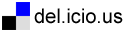
<style>
.page{position:relative;width:140px;height:32px;background:#ffffff}
.page>*{position:absolute;margin:0}
.t1{font:20px "ArialMT";color:#000000}
</style>
<div class="page">
<p class="t1" style="left:34px;top:8px;width:89px;height:16px">del.icio.us</p>
</div>
